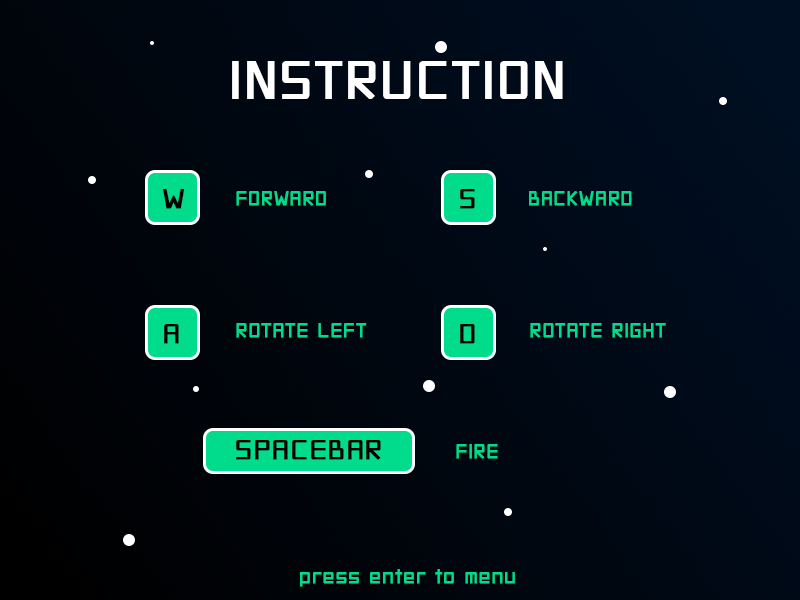
<style>
.page{position:relative;width:800px;height:600px}
.page>*{position:absolute;margin:0}
.t1{font:82.3px "2006iannnnnISO";color:#ffffff;font-weight:bold}
.t2{font:43.3px "2006iannnnnISO";color:#000000;font-weight:bold}
.t3{font:30px "2006iannnnnISO";color:#00dc8c;font-weight:bold}
</style>
<div class="page">
<p class="t1" style="left:232px;top:61px;width:331px;height:38px">INSTRUCTION</p>
<p class="t2" style="left:163px;top:189px;width:22px;height:20px">W</p>
<p class="t3" style="left:236px;top:191px;width:90px;height:15px">FORWARD</p>
<p class="t2" style="left:460px;top:189px;width:15px;height:20px">S</p>
<p class="t3" style="left:529px;top:191px;width:103px;height:15px">BACKWARD</p>
<p class="t2" style="left:164px;top:324px;width:15px;height:20px">A</p>
<p class="t3" style="left:236px;top:323px;width:131px;height:15px">ROTATE LEFT</p>
<p class="t2" style="left:460px;top:324px;width:15px;height:20px">D</p>
<p class="t3" style="left:530px;top:323px;width:136px;height:15px">ROTATE RIGHT</p>
<p class="t2" style="left:236px;top:440px;width:145px;height:20px">SPACEBAR</p>
<p class="t3" style="left:456px;top:444px;width:42px;height:15px">FIRE</p>
<p class="t3" style="left:300px;top:569px;width:215px;height:18px">press enter to menu</p>
</div>
